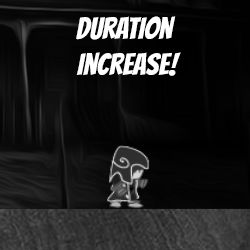
<style>
.page{position:relative;width:250px;height:250px}
.page>*{position:absolute;margin:0}
.t1{font:30px "Bangers-Regular";color:#ffffff}
</style>
<div class="page">
<p class="t1" style="left:76px;top:16px;width:105px;height:60px;text-align:center">duration <br>increase!</p>
</div>
